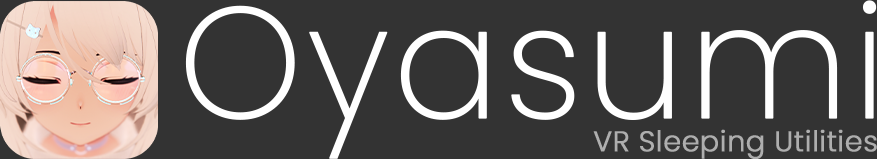
<style>
.page{position:relative;width:877px;height:159px;background:#333333}
.page>*{position:absolute;margin:0}
.t1{font:157.7px "Poppins-ExtraLight";color:#ffffff;font-weight:bold}
.t2{font:28.4px "Poppins-Light";color:#aeaeae;font-weight:bold}
</style>
<div class="page">
<p class="t1" style="left:185px;top:0px;width:692px;height:159px">Oyasumi</p>
<p class="t2" style="left:593px;top:129px;width:284px;height:30px">VR Sleeping Utilities</p>
</div>
